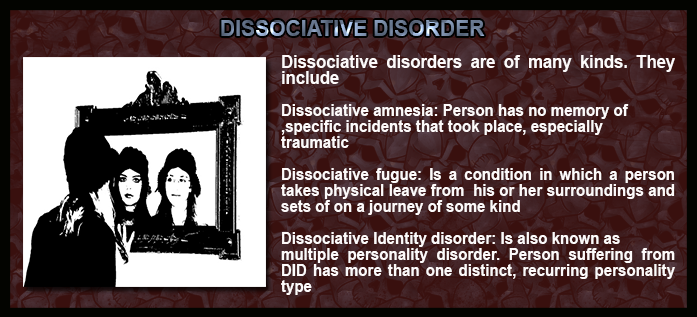
<style>
.page{position:relative;width:697px;height:317px}
.page>*{position:absolute;margin:0}
.t1{font:22.4px "Arial-BoldMT";letter-spacing:0.002em;scale:0.94 1}
.t2{font:16px/16px "Arial-BoldMT";letter-spacing:0.002em;color:#fdfafa;scale:0.94 1}
.t3{font:17.6px/16px "Arial-BoldMT";letter-spacing:0.002em;color:#fdfafa;scale:0.94 1}
</style>
<div class="page">
<p class="t1" style="left:221px;top:20px;width:264px;height:16px">DISSOCIATIVE DISORDER</p>
<p class="t2" style="left:281px;top:55px;width:394px;height:240px;text-align:justify"><span class="t3">Dissociative disorders are of many kinds. They include<br></span><br>Dissociative amnesia: Person has no memory of <br>specific incidents that took place, especially, <br>traumatic<br><br>Dissociative fugue: Is a condition in which a person takes physical leave from  his or her surroundings and sets of on a journey of some kind<br><br>Dissociative Identity disorder: Is also known as <br>multiple personality disorder. Person suffering from DID has more than one distinct, recurring personality type</p>
</div>
